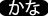
<style>
.page{position:relative;width:48px;height:16px;background:#000000}
.page>*{position:absolute;margin:0}
.t1{font:16.7px "KozGoPr6N-Regular";color:#ffffff}
</style>
<div class="page">
<p class="t1" style="left:8px;top:0px;width:32px;height:16px">かな</p>
</div>
